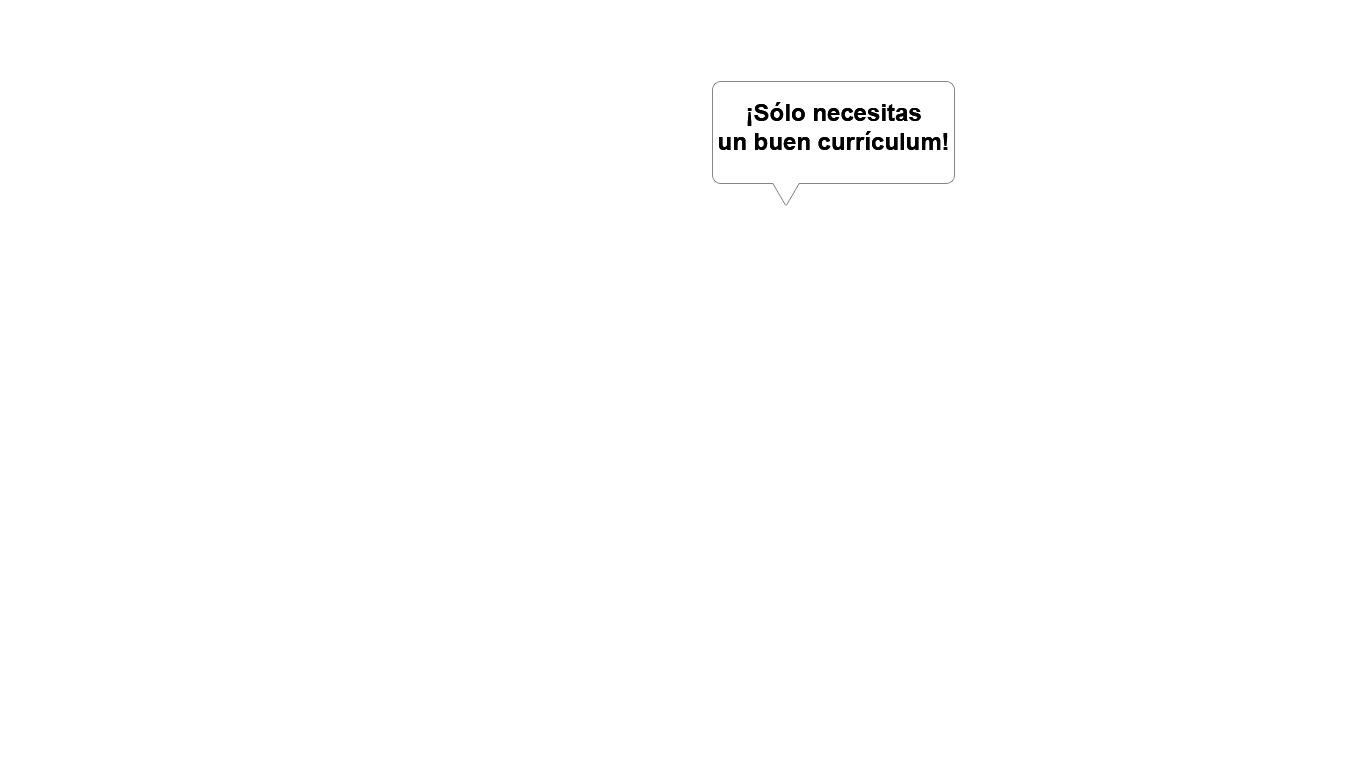
<style>
.page{position:relative;width:1366px;height:768px;background:#ffffff}
.page>*{position:absolute;margin:0}
.t1{font:24px "Arial-BoldMT";color:#000000}
</style>
<div class="page">
<p class="t1" style="left:719px;top:102px;width:229px;height:48px;text-align:center">¡Sólo necesitas<br>un buen currículum!</p>
</div>
